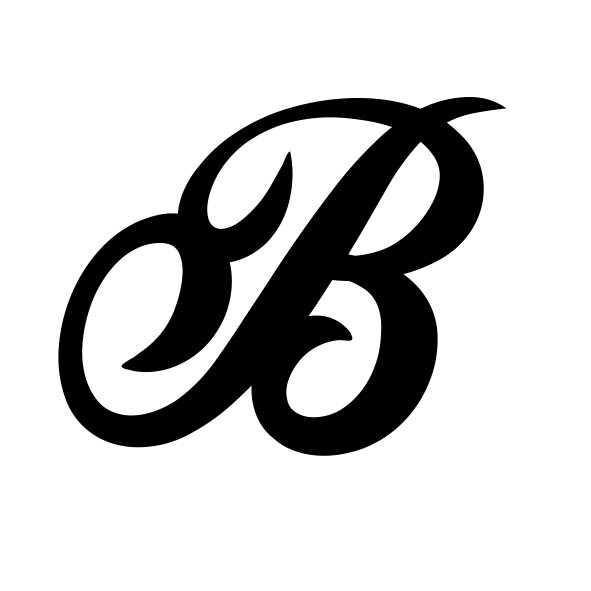
<style>
.page{position:relative;width:591px;height:591px;background:#ffffff}
.page>*{position:absolute;margin:0}
.t1{font:458.3px "PainterPERSONALUSEONLY";color:#000000}
</style>
<div class="page">
<p class="t1" style="left:58px;top:97px;width:449px;height:359px">B</p>
</div>
